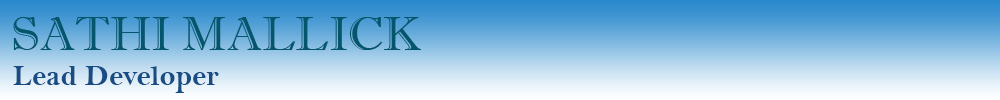
<style>
.page{position:relative;width:1000px;height:100px}
.page>*{position:absolute;margin:0}
.t1{font:48px "ImprintMT-Shadow";color:#04566d}
.t2{font:30px "BellMTBold";color:#174d84}
</style>
<div class="page">
<p class="t1" style="left:13px;top:17px;width:408px;height:33px">SATHI MALLICK</p>
<p class="t2" style="left:13px;top:66px;width:206px;height:27px">Lead Developer</p>
</div>
